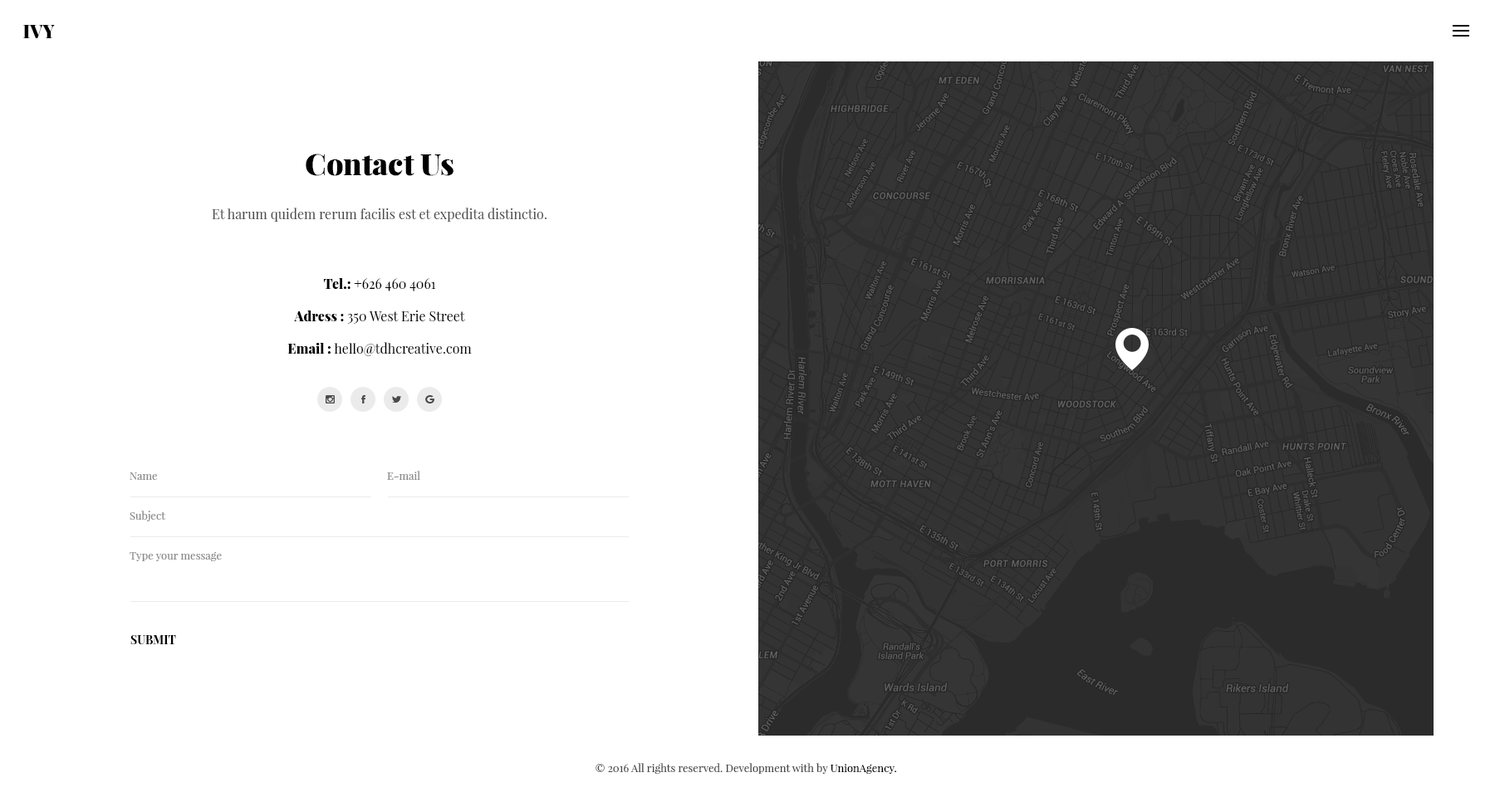
<style>
.page{position:relative;width:1495px;height:797px;background:#ffffff}
.page>*{position:absolute;margin:0}
.t1{font:18.3px "PlayfairDisplay-Black";color:#000000}
.t2{font:29.9px "PlayfairDisplay-Black";color:#000000}
.t3{font:13.3px "PlayfairDisplay-Regular";color:#494949}
.t4{font:13.3px "PlayfairDisplay-Regular";color:#000000}
.t5{font:13.3px "PlayfairDisplay-Black";color:#000000}
.t6{font:10.8px "PlayfairDisplay-Regular";color:#898989}
.t7{font:11.6px "PlayfairDisplay-Bold";color:#000000}
.t8{font:10.8px "PlayfairDisplay-Regular";color:#494949}
.t9{font:10.8px "PlayfairDisplay-Regular";color:#000000}
</style>
<div class="page">
<p class="t1" style="left:23px;top:25px;width:32px;height:13px">IVY</p>
<p class="t2" style="left:306px;top:154px;width:148px;height:22px">Contact Us</p>
<p class="t3" style="left:212px;top:208px;width:335px;height:14px">Et harum quidem rerum facilis est et expedita distinctio.</p>
<p class="t4" style="left:323px;top:278px;width:113px;height:14px"><span class="t5">Tel.: </span>+626 460 4061</p>
<p class="t4" style="left:294px;top:311px;width:171px;height:13px"><span class="t5">Adress : </span>350 West Erie Street</p>
<p class="t4" style="left:287px;top:342px;width:185px;height:14px"><span class="t5">Email : </span>hello@tdhcreative.com</p>
<p class="t6" style="left:130px;top:473px;width:28px;height:7px">Name</p>
<p class="t6" style="left:387px;top:471px;width:33px;height:9px">E-mail</p>
<p class="t6" style="left:130px;top:511px;width:36px;height:11px">Subject</p>
<p class="t6" style="left:130px;top:552px;width:92px;height:10px">Type your message</p>
<p class="t7" style="left:130px;top:635px;width:46px;height:10px">SUBMIT</p>
<p class="t8" style="left:596px;top:763px;width:301px;height:11px">© 2016 All rights reserved. Development with by <span class="t9">UnionAgency.</span></p>
</div>
